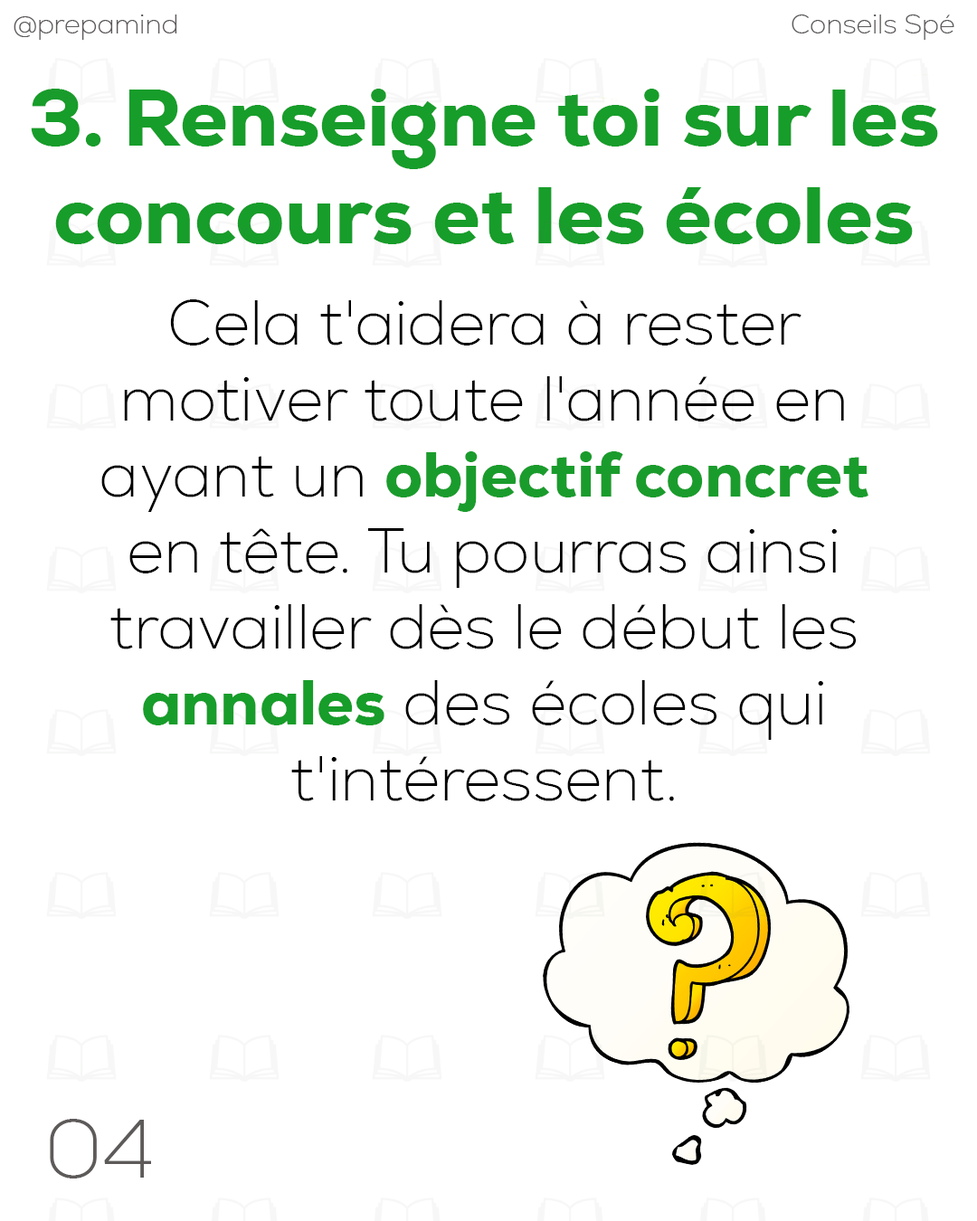
<style>
.page{position:relative;width:977px;height:1221px;background:#ffffff}
.page>*{position:absolute;margin:0}
.t1{font:27.1px "Nexa-ExtraLight";color:#5e5a5a}
.t2{font:81.2px "Nexa-Heavy";color:#179d2a}
.t3{font:63.3px "Nexa-ExtraLight";color:#000000}
.t4{font:63.3px "Nexa-Heavy";color:#1a9c2c}
.t5{font:63.3px "Nexa-Heavy";color:#179d2a}
.t6{font:81.7px "Nexa-ExtraLight";color:#5e5a5a}
</style>
<div class="page">
<p class="t1" style="left:14px;top:14px;width:163px;height:26px">@prepamind</p>
<p class="t1" style="left:791px;top:14px;width:163px;height:26px">Conseils Spé</p>
<p class="t2" style="left:31px;top:89px;width:907px;height:155px;text-align:center">3. Renseigne toi sur les concours et les écoles</p>
<p class="t3" style="left:101px;top:299px;width:767px;height:502px;text-align:center">Cela t'aidera à rester motiver toute l'année en ayant un <span class="t4">objectif concret</span> en tête. Tu pourras ainsi travailler dès le début les <span class="t5">annales</span> des écoles qui t'intéressent.</p>
<p class="t6" style="left:50px;top:1119px;width:101px;height:59px">04</p>
</div>
